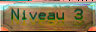
<style>
.page{position:relative;width:96px;height:32px}
.page>*{position:absolute;margin:0}
.t1{font:12px "Terminal"}
</style>
<div class="page">
<p class="t1" style="left:11px;top:9px;width:72px;height:11px">Niveau 3</p>
</div>
